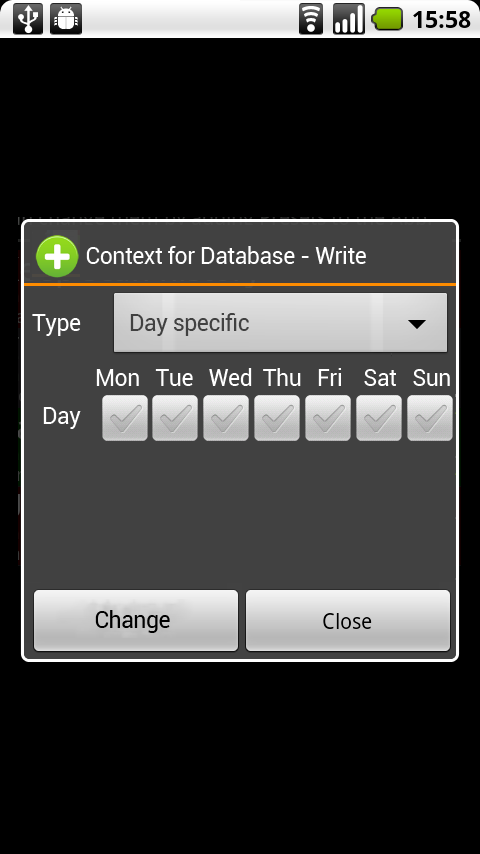
<style>
.page{position:relative;width:480px;height:854px;background:#000000}
.page>*{position:absolute;margin:0}
.t1{font:23px "Roboto-Regular";letter-spacing:-0.02em;color:#ffffff}
.t2{font:23px "Roboto-Regular";letter-spacing:-0.02em;color:#414141}
.t3{font:23px "Roboto-Regular";letter-spacing:-0.02em;color:#000000}
</style>
<div class="page">
<p class="t1" style="left:86px;top:246px;width:280px;height:18px">Context for Database - Write</p>
<p class="t1" style="left:32px;top:314px;width:49px;height:22px">Type</p>
<p class="t2" style="left:130px;top:313px;width:119px;height:23px">Day specific</p>
<p class="t1" style="left:96px;top:368px;width:354px;height:18px">Mon   Tue   Wed  Thu   Fri    Sat   Sun</p>
<p class="t1" style="left:43px;top:407px;width:38px;height:22px">Day</p>
<p class="t3" style="left:95px;top:610px;width:75px;height:23px">Change</p>
</div>
